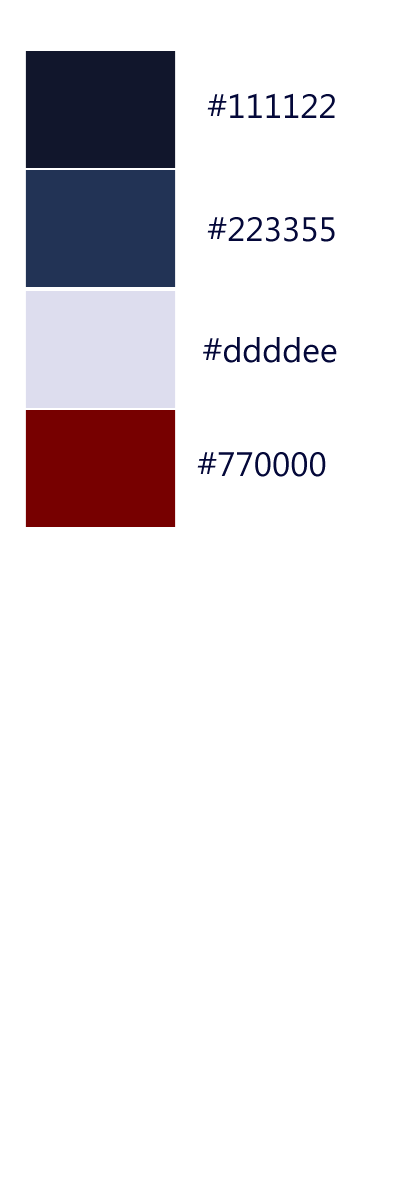
<style>
.page{position:relative;width:400px;height:1200px;background:#ffffff}
.page>*{position:absolute;margin:0}
.t1{font:33.9px "Ebrima";color:#040839}
</style>
<div class="page">
<p class="t1" style="left:207px;top:93px;width:128px;height:25px">#111122</p>
<p class="t1" style="left:207px;top:217px;width:128px;height:25px">#223355</p>
<p class="t1" style="left:203px;top:337px;width:134px;height:26px">#ddddee</p>
<p class="t1" style="left:197px;top:452px;width:129px;height:25px">#770000</p>
</div>
